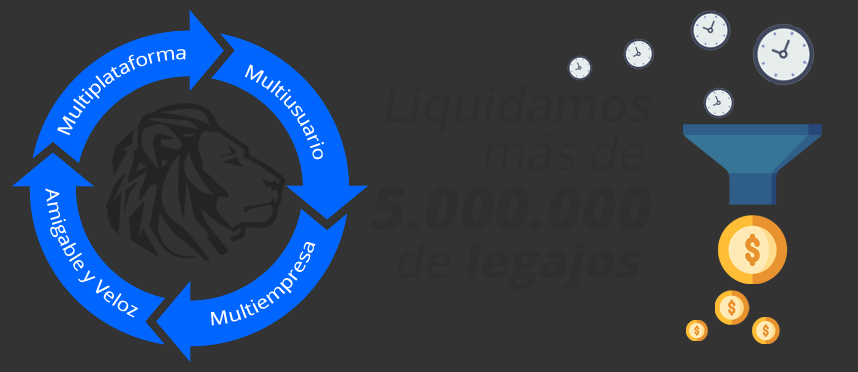
<style>
.page{position:relative;width:858px;height:372px;background:#333333}
.page>*{position:absolute;margin:0}
.t1{font:18px "OpenSans";color:#fefeff}
.t2{font:48px/48px "OpenSans-Semibold";color:#2d2f30;font-style:italic}
.t3{font:48px/48px "OpenSans";color:#2d2f30;font-style:italic}
.t4{font:60px/60px "OpenSans-Extrabold";color:#2d2f30;font-style:italic}
.t5{font:48px/48px "OpenSans-Extrabold";color:#2d2f30;font-style:italic}
</style>
<div class="page">
<p class="t1" style="left:57px;top:49px;width:129px;height:87px;rotate:-33deg">Multiplataforma</p>
<p class="t1" style="left:245px;top:64px;width:79px;height:96px;rotate:50deg">Multiusuario</p>
<p class="t2" style="left:371px;top:85px;width:282px;height:205px">Liquidamos<br><span class="t3">         más de<br></span><span class="t4">5.000.000<br></span>  de<span class="t5"> legajos</span></p>
<p class="t1" style="left:45px;top:188px;width:93px;height:130px;rotate:55deg">Amigable y Veloz</p>
<p class="t1" style="left:211px;top:242px;width:105px;height:84px;rotate:-38deg">Multiempresa</p>
</div>
